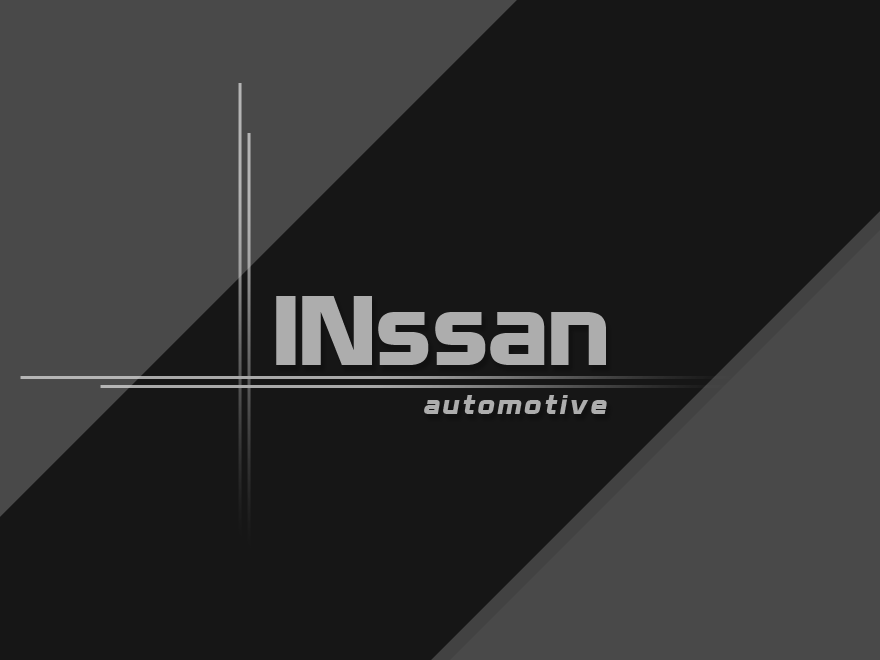
<style>
.page{position:relative;width:880px;height:660px;background:#161616}
.page>*{position:absolute;margin:0}
.t1{font:104px "Nissan";color:#adadad}
.t2{font:28px "Nissan";letter-spacing:0.1em;color:#adadad;font-style:italic}
</style>
<div class="page">
<p class="t1" style="left:276px;top:296px;width:330px;height:69px">INssan</p>
<p class="t2" style="left:424px;top:395px;width:183px;height:19px">automotive</p>
</div>
